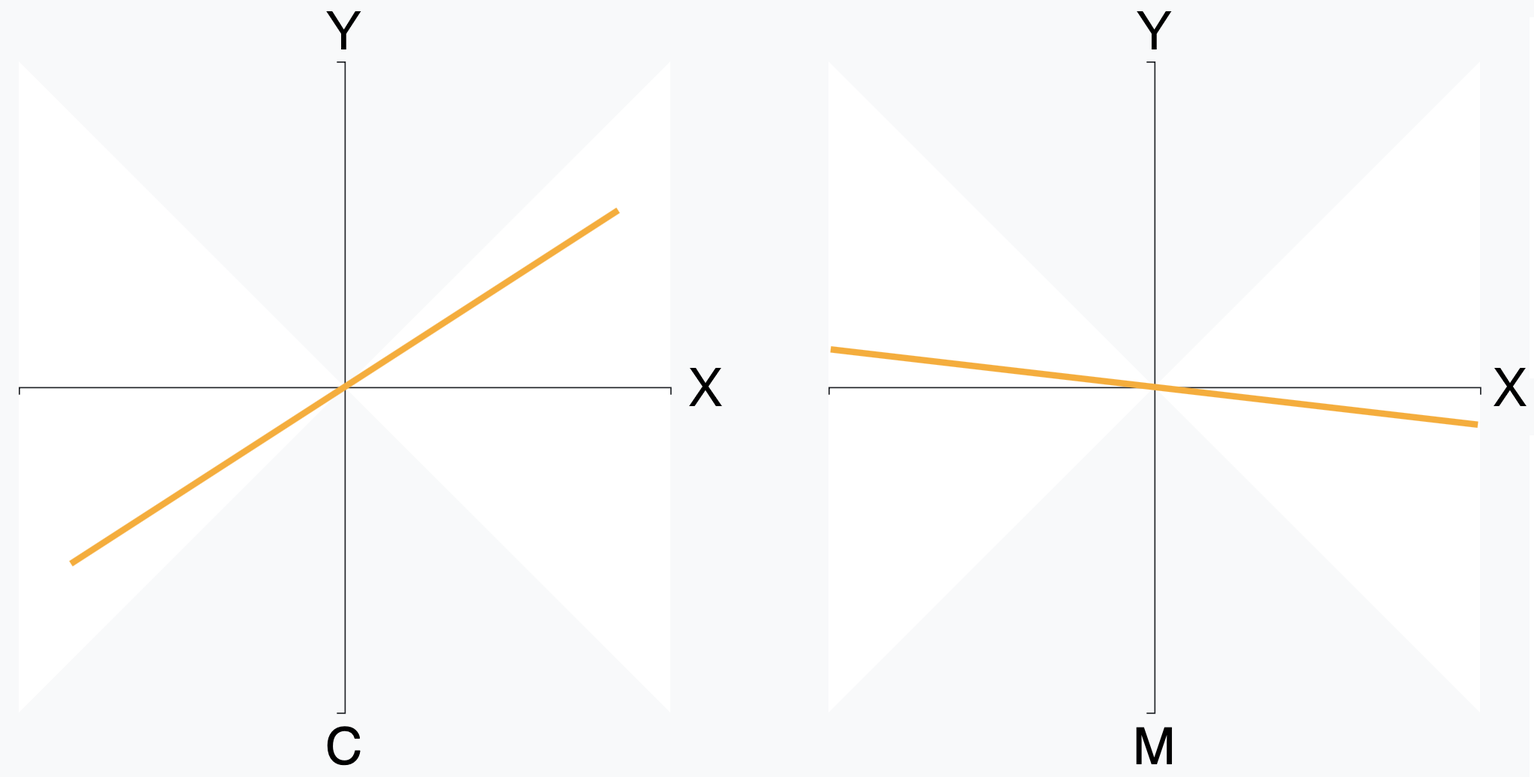
<style>
.page{position:relative;width:1534px;height:777px;background:#f8f9fa}
.page>*{position:absolute;margin:0}
.t1{font:54px "HelveticaNeue";color:#000000}
</style>
<div class="page">
<p class="t1" style="left:326px;top:11px;width:35px;height:38px">Y</p>
<p class="t1" style="left:1137px;top:11px;width:35px;height:38px">Y</p>
<p class="t1" style="left:689px;top:368px;width:34px;height:38px">X</p>
<p class="t1" style="left:1493px;top:368px;width:34px;height:38px">X</p>
</div>
